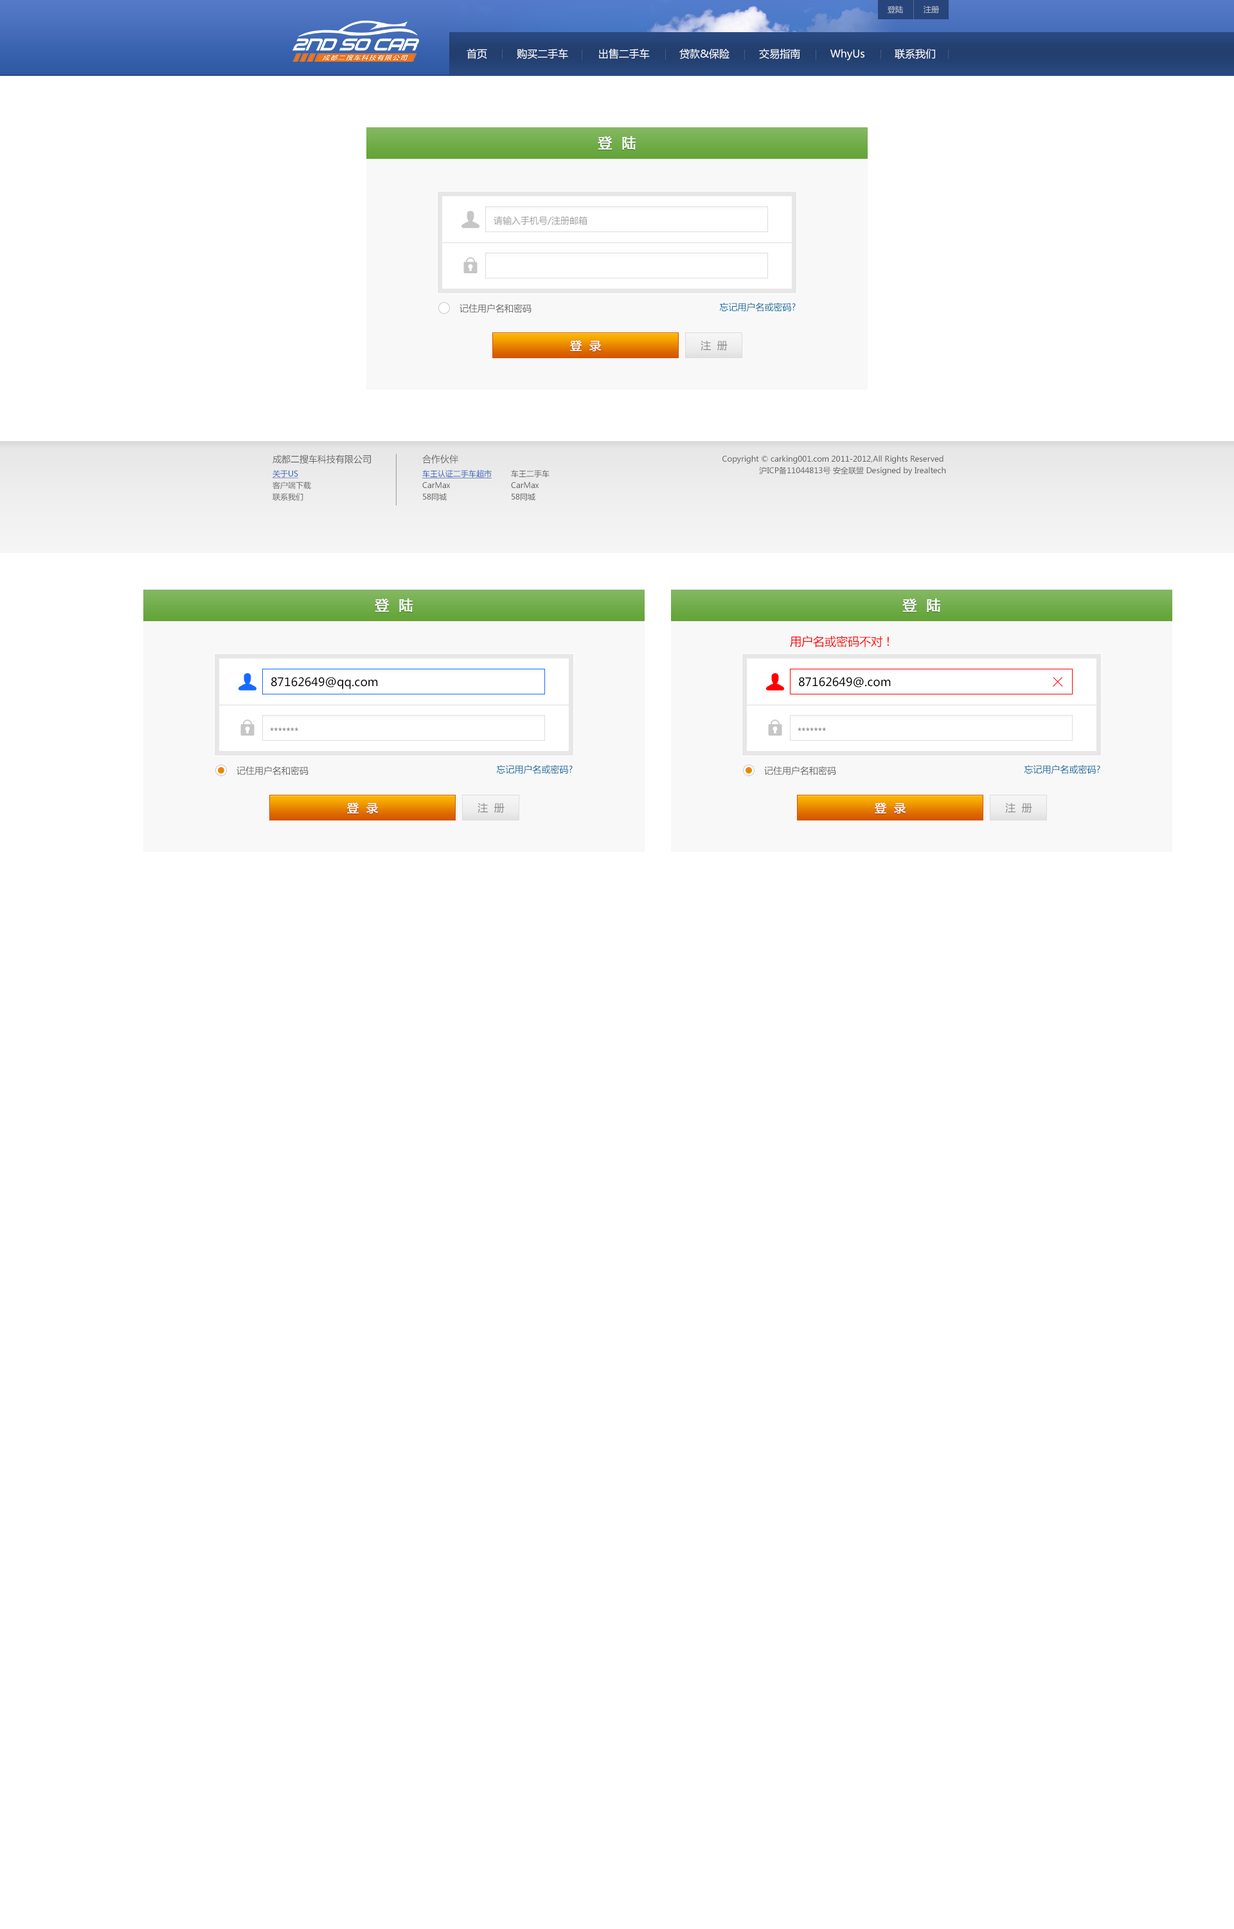
<style>
.page{position:relative;width:1234px;height:1929px;background:#ffffff}
.page>*{position:absolute;margin:0}
.t1{font:7.7px "MicrosoftYaHei";color:#bdc3d1}
.t2{font:10.3px "MicrosoftYaHei";color:#ffffff}
.t3{font:14.1px "MicrosoftYaHei";color:#ffffff;text-transform:uppercase;font-weight:bold}
.t4{font:9px "MicrosoftYaHei";color:#9e9e9e}
.t5{font:9px "MicrosoftYaHei";color:#666666}
.t6{font:9px "MicrosoftYaHei";color:#04699c}
.t7{font:11.6px "MicrosoftYaHei";color:#ffffff;text-transform:uppercase;font-weight:bold}
.t8{font:10.3px "MicrosoftYaHei";color:#888888;text-transform:uppercase}
.t9{font:7.7px/11.6px "MicrosoftYaHei";color:#666666}
.t10{font:9px/15.4px "MicrosoftYaHei";color:#666666}
.t11{font:7.7px/11.6px "MicrosoftYaHei";color:#3163bc;text-decoration:underline}
.t12{font:7.7px/11.6px "MicrosoftYaHei"}
.t13{font:11.6px "MicrosoftYaHei";color:#ff0000}
.t14{font:11.6px "MicrosoftYaHei";color:#000000}
</style>
<div class="page">
<p class="t1" style="left:888px;top:6px;width:51px;height:8px">登陆         注册</p>
<p class="t2" style="left:467px;top:48px;width:468px;height:12px">首页 购买二手车 出售二手车 贷款&amp;保险 交易指南 WhyUs 联系我们</p>
<p class="t3" style="left:598px;top:136px;width:38px;height:14px">登  陆</p>
<p class="t4" style="left:494px;top:216px;width:94px;height:9px">请输入手机号/注册邮箱</p>
<p class="t5" style="left:460px;top:303px;width:72px;height:10px">记住用户名和密码</p>
<p class="t6" style="left:719px;top:302px;width:77px;height:10px">忘记用户名或密码?</p>
<p class="t7" style="left:570px;top:340px;width:32px;height:12px">登  录</p>
<p class="t8" style="left:701px;top:340px;width:27px;height:10px">注  册</p>
<p class="t5" style="left:273px;top:455px;width:98px;height:9px">成都二搜车科技有限公司</p>
<p class="t5" style="left:273px;top:455px;width:98px;height:9px">成都二搜车科技有限公司</p>
<p class="t9" style="left:422px;top:455px;width:70px;height:46px"><span class="t10">合作伙伴<br></span>车王认证二手车超市<br>CarMax<br>58同城</p>
<p class="t9" style="left:422px;top:455px;width:70px;height:46px"><span class="t10">合作伙伴<br></span><span class="t11">车王认证二手车超市<br></span>CarMax<br>58同城</p>
<p class="t9" style="left:723px;top:455px;width:223px;height:20px;text-align:right">Copyright © carking001.com 2011-2012,All Rights Reserved <br>沪ICP备11044813号 安全联盟 Designed by Irealtech</p>
<p class="t9" style="left:723px;top:455px;width:223px;height:20px;text-align:right">Copyright © carking001.com 2011-2012,All Rights Reserved <br>沪ICP备11044813号 安全联盟 Designed by Irealtech</p>
<p class="t12" style="left:273px;top:470px;width:38px;height:31px">关于US<br>客户端下载<br>联系我们</p>
<p class="t9" style="left:273px;top:470px;width:38px;height:31px"><span class="t11">关于US<br></span>客户端下载<br>联系我们</p>
<p class="t9" style="left:511px;top:470px;width:39px;height:31px">车王二手车<br>CarMax<br>58同城</p>
<p class="t9" style="left:511px;top:470px;width:39px;height:31px">车王二手车<br>CarMax<br>58同城</p>
<p class="t3" style="left:375px;top:598px;width:38px;height:14px">登  陆</p>
<p class="t3" style="left:903px;top:598px;width:38px;height:14px">登  陆</p>
<p class="t13" style="left:790px;top:635px;width:99px;height:12px">用户名或密码不对！</p>
<p class="t14" style="left:271px;top:677px;width:107px;height:12px">87162649@qq.com</p>
<p class="t14" style="left:799px;top:677px;width:92px;height:10px">87162649@.com</p>
<p class="t5" style="left:270px;top:727px;width:28px;height:4px">*******</p>
<p class="t5" style="left:798px;top:727px;width:28px;height:4px">*******</p>
<p class="t5" style="left:237px;top:766px;width:72px;height:9px">记住用户名和密码</p>
<p class="t6" style="left:496px;top:764px;width:77px;height:10px">忘记用户名或密码?</p>
<p class="t5" style="left:764px;top:766px;width:72px;height:9px">记住用户名和密码</p>
<p class="t6" style="left:1024px;top:764px;width:77px;height:10px">忘记用户名或密码?</p>
<p class="t7" style="left:347px;top:802px;width:32px;height:12px">登  录</p>
<p class="t8" style="left:478px;top:802px;width:27px;height:11px">注  册</p>
<p class="t7" style="left:875px;top:802px;width:31px;height:12px">登  录</p>
<p class="t8" style="left:1005px;top:802px;width:27px;height:11px">注  册</p>
</div>
